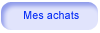
<style>
.page{position:relative;width:100px;height:33px;background:#e1e4fc}
.page>*{position:absolute;margin:0}
.t1{font:11px "ArialMT";color:#092ff6}
</style>
<div class="page">
<p class="t1" style="left:24px;top:11px;width:55px;height:8px">Mes achats</p>
</div>
